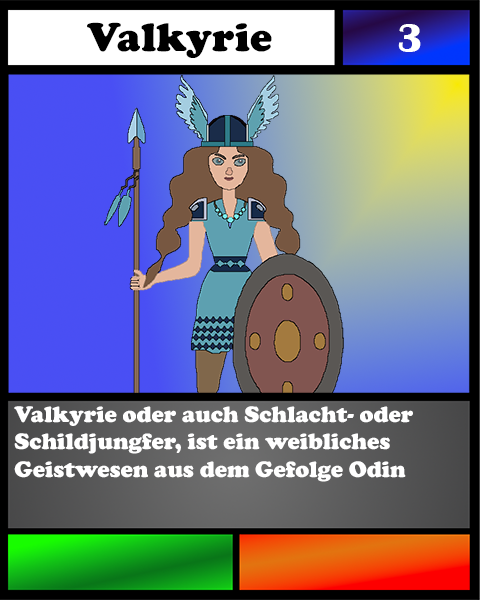
<style>
.page{position:relative;width:480px;height:600px}
.page>*{position:absolute;margin:0}
.t1{font:41.7px "CooperBlack";color:#000000}
.t2{font:41.7px "BritannicBold";color:#ffffff}
.t3{font:23.1px "CooperBlack";color:#ffffff}
</style>
<div class="page">
<p class="t1" style="left:87px;top:22px;width:185px;height:36px">Valkyrie</p>
<p class="t2" style="left:398px;top:24px;width:23px;height:28px">3</p>
<p class="t3" style="left:14px;top:406px;width:399px;height:76px">Valkyrie oder auch Schlacht- oder Schildjungfer, ist ein weibliches Geistwesen aus dem Gefolge Odin</p>
</div>
